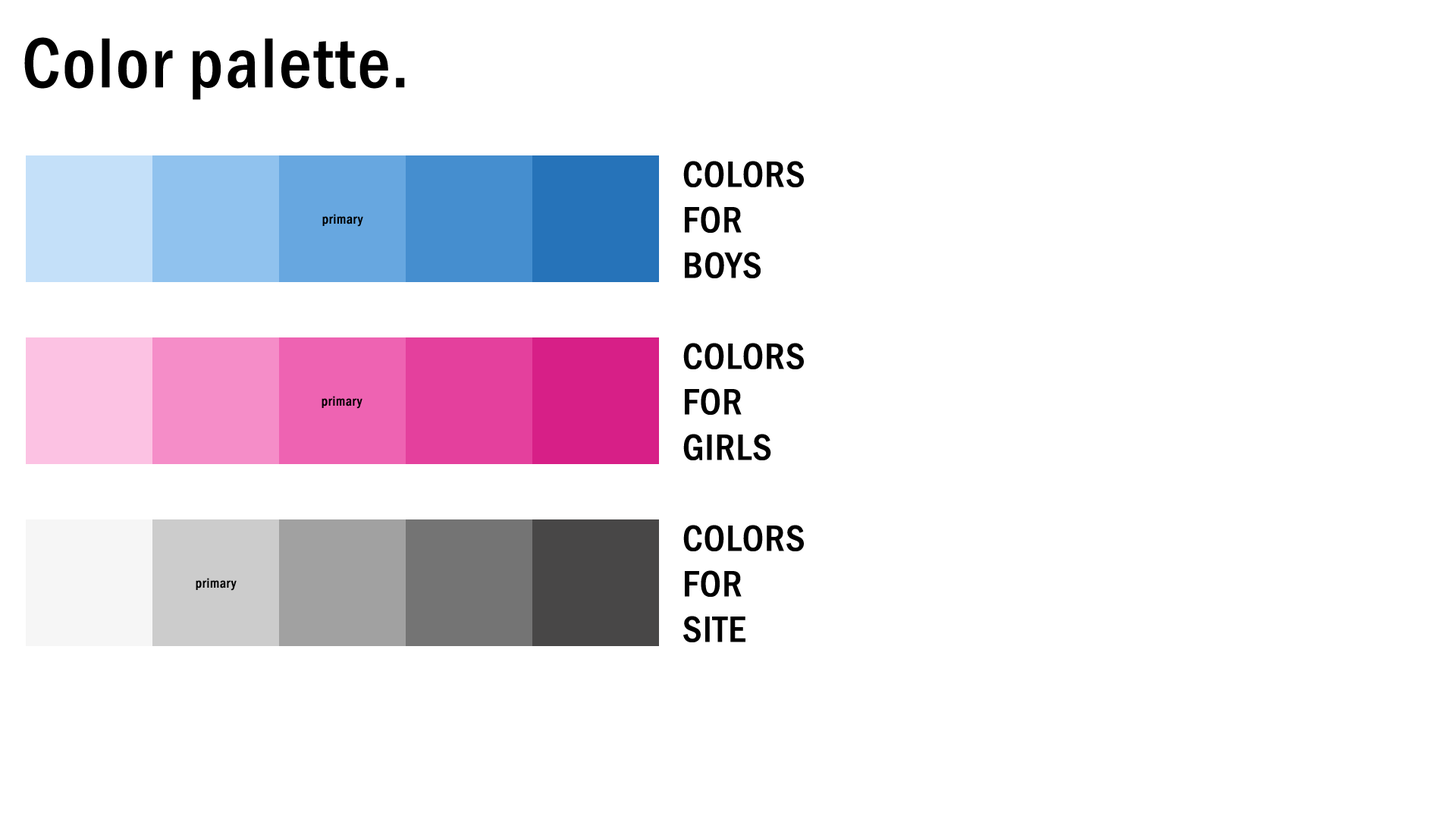
<style>
.page{position:relative;width:1456px;height:819px;background:#ffffff}
.page>*{position:absolute;margin:0}
.t1{font:72.8px "FranklinGothic-MediumCond";color:#000000;font-weight:bold}
.t2{font:37.9px "FranklinGothic-MediumCond";color:#000000;font-weight:bold}
.t3{font:13.6px "FranklinGothic-MediumCond";color:#000000;font-weight:bold}
</style>
<div class="page">
<p class="t1" style="left:24px;top:37px;width:381px;height:63px">Color palette.</p>
<p class="t2" style="left:683px;top:161px;width:121px;height:117px">COLORS<br>FOR<br>BOYS</p>
<p class="t3" style="left:322px;top:214px;width:41px;height:13px">primary</p>
<p class="t2" style="left:683px;top:343px;width:121px;height:117px">COLORS<br>FOR<br>GIRLS</p>
<p class="t3" style="left:322px;top:396px;width:40px;height:13px">primary</p>
<p class="t2" style="left:683px;top:525px;width:121px;height:117px">COLORS<br>FOR<br>SITE</p>
<p class="t3" style="left:196px;top:578px;width:41px;height:13px">primary</p>
</div>
